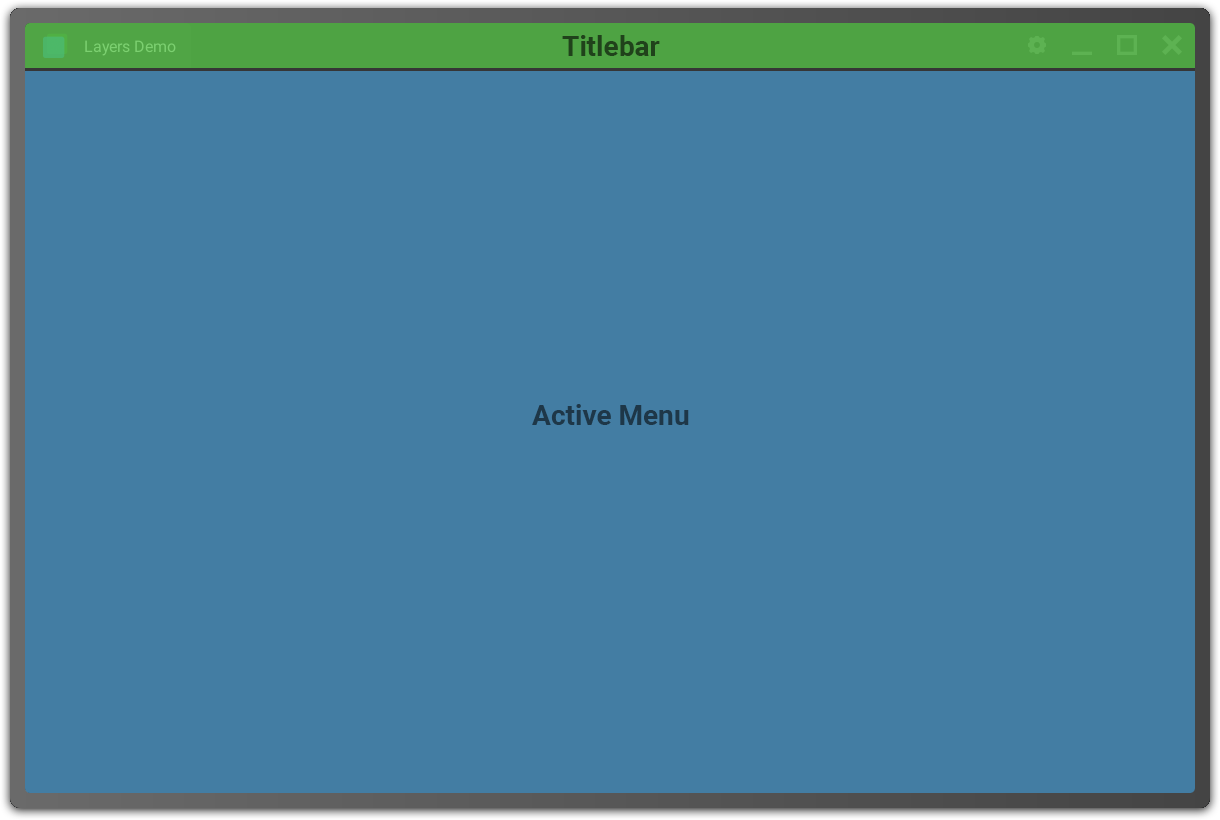
<style>
.page{position:relative;width:1220px;height:820px;background:#437da3}
.page>*{position:absolute;margin:0}
.t1{font:28px "Roboto-Bold";color:#20421b}
.t2{font:28px "Roboto-Bold";color:#1e3748}
</style>
<div class="page">
<p class="t1" style="left:562px;top:35px;width:98px;height:21px">Titlebar</p>
<p class="t2" style="left:532px;top:404px;width:157px;height:21px">Active Menu</p>
</div>
